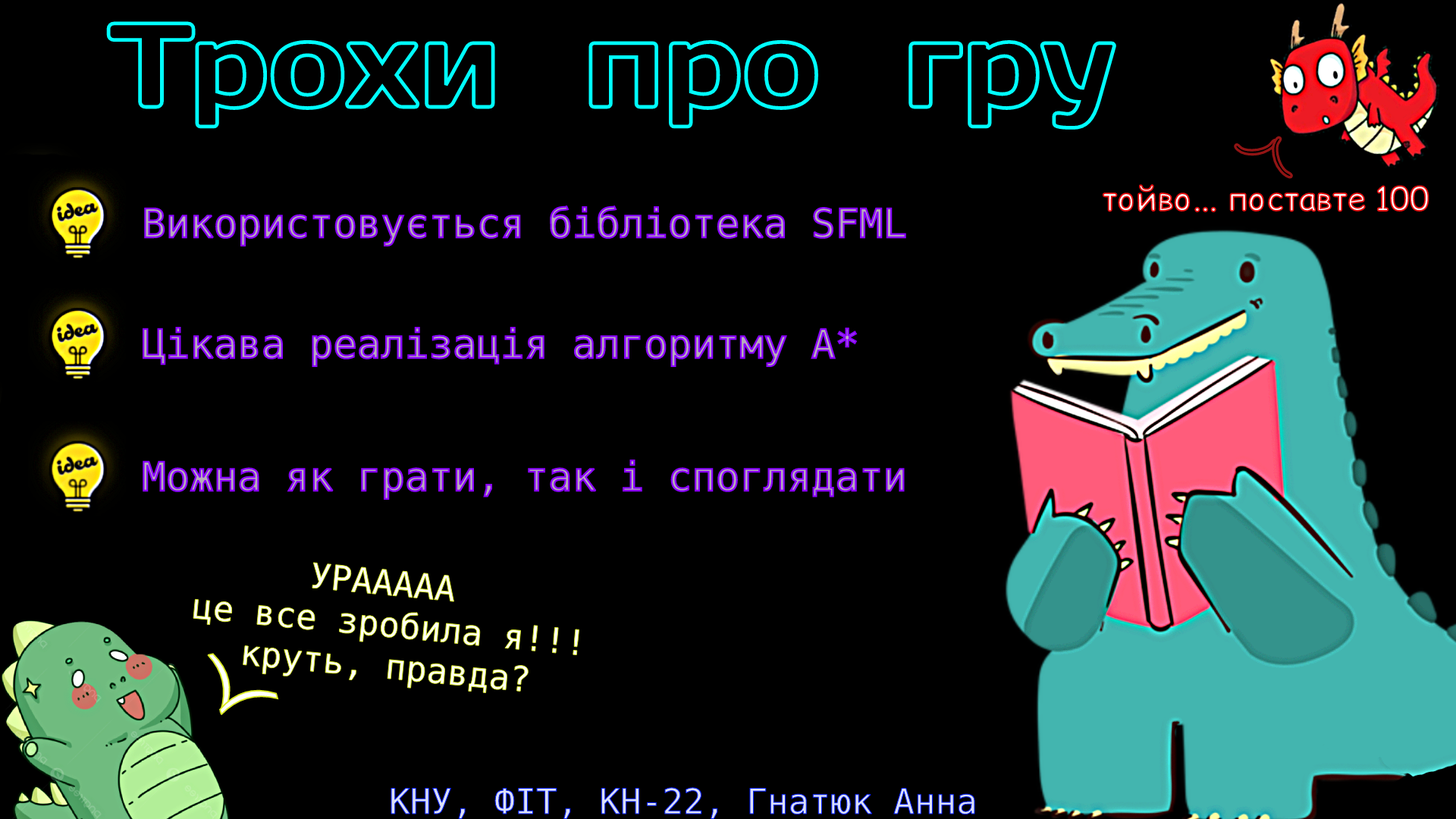
<style>
.page{position:relative;width:1456px;height:819px;background:#000000}
.page>*{position:absolute;margin:0}
.t1{font:119.2px "DaysOne-Regular";color:#000000}
.t2{font:41.8px "ComicRelief"}
.t3{font:32.5px "ComicRelief"}
.t4{font:39.7px "DejaVuSansMono"}
.t5{font:34.6px "DejaVuSansMono"}
.t6{font:64.8px "DejaVuSansMono"}
.t7{font:65.6px "DejaVuSansMono"}
.t8{font:34.9px "DejaVuSansMono"}
</style>
<div class="page">
<p class="t1" style="left:105px;top:20px;width:1013px;height:111px">Трохи  про  гру</p>
<p class="t2" style="left:1272px;top:136px;width:21px;height:43px;rotate:163deg">)</p>
<p class="t2" style="left:1234px;top:139px;width:44px;height:17px;rotate:83deg">)</p>
<p class="t3" style="left:1101px;top:183px;width:329px;height:30px">тойво... поставте 100</p>
<p class="t4" style="left:144px;top:205px;width:762px;height:41px">Використовується бібліотека SFML</p>
<p class="t4" style="left:143px;top:327px;width:715px;height:40px">Цікава реалізація алгоритму А*</p>
<p class="t4" style="left:143px;top:460px;width:762px;height:40px">Можна як грати, так і споглядати</p>
<p class="t5" style="left:193px;top:562px;width:386px;height:131px;text-align:center;rotate:5deg">УРААААА <br>це все зробила я!!!<br>круть, правда?</p>
<p class="t6" style="left:207px;top:653px;width:24px;height:60px;rotate:-13deg">)</p>
<p class="t7" style="left:219px;top:689px;width:60px;height:26px;rotate:-106deg">)</p>
<p class="t8" style="left:391px;top:787px;width:584px;height:32px">КНУ, ФІТ, КН-22, Гнатюк Анна</p>
</div>
